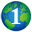
<style>
.page{position:relative;width:32px;height:32px;background:#ffffff}
.page>*{position:absolute;margin:0}
.t1{font:24px "TimesNewRomanPS-BoldMT";color:#fffefe}
</style>
<div class="page">
<p class="t1" style="left:11px;top:8px;width:10px;height:16px">1</p>
</div>
